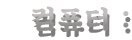
<style>
.page{position:relative;width:132px;height:40px;background:#ffffff}
.page>*{position:absolute;margin:0}
.t1{font:26.9px "SDKukdetopokki-bBd";letter-spacing:0.08em}
</style>
<div class="page">
<p class="t1" style="left:32px;top:6px;width:97px;height:26px">컴퓨터 :</p>
</div>
